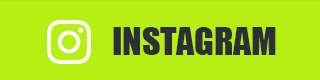
<style>
.page{position:relative;width:320px;height:80px;background:#b6ef13}
.page>*{position:absolute;margin:0}
.t1{font:36px "Impact";color:#2b3037}
</style>
<div class="page">
<p class="t1" style="left:113px;top:27px;width:163px;height:28px">INSTAGRAM</p>
</div>
